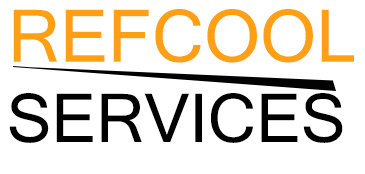
<style>
.page{position:relative;width:365px;height:174px;background:#ffffff}
.page>*{position:absolute;margin:0}
.t1{font:67px "MicrosoftSansSerif";color:#000000}
.t2{font:72px "MicrosoftSansSerif";color:#ff9f14}
</style>
<div class="page">
<p class="t1" style="left:9px;top:9px;width:345px;height:134px"><span class="t2"> REFCOOL<br></span> SERVICES</p>
</div>
